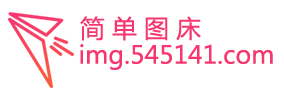
<style>
.page{position:relative;width:284px;height:96px;background:#ffffff}
.page>*{position:absolute;margin:0}
.t1{font:24.6px "MicrosoftYaHei";color:#f63670}
</style>
<div class="page">
<p class="t1" style="left:80px;top:16px;width:121px;height:25px">简 单 图 床</p>
<p class="t1" style="left:80px;top:44px;width:193px;height:26px">img.545141.com</p>
</div>
